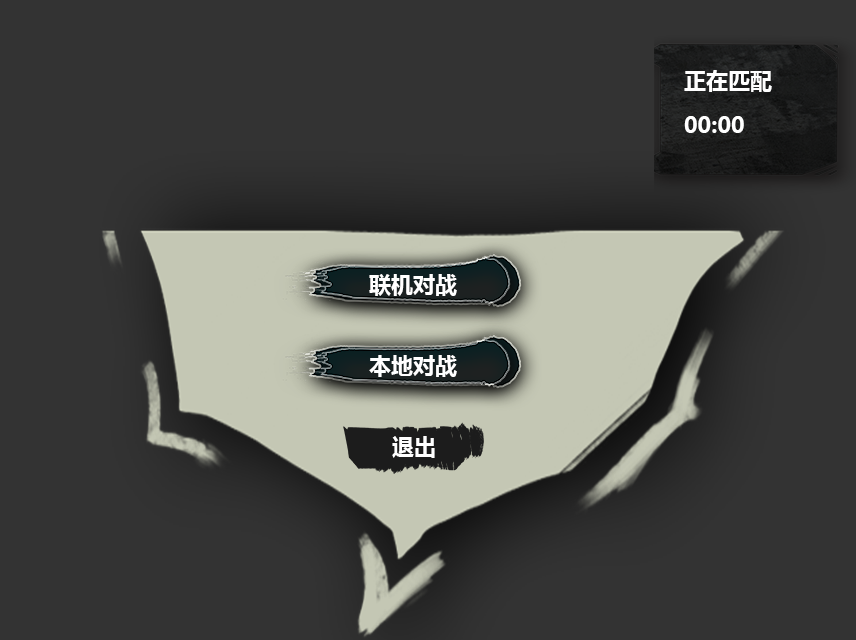
<style>
.page{position:relative;width:856px;height:640px;background:#333333}
.page>*{position:absolute;margin:0}
.t1{font:22px "MicrosoftYaHei-Bold";color:#ffffff}
</style>
<div class="page">
<p class="t1" style="left:684px;top:70px;width:88px;height:22px">正在匹配</p>
<p class="t1" style="left:684px;top:116px;width:60px;height:17px">00:00</p>
<p class="t1" style="left:369px;top:274px;width:88px;height:22px">联机对战</p>
<p class="t1" style="left:369px;top:355px;width:88px;height:22px">本地对战</p>
<p class="t1" style="left:392px;top:436px;width:43px;height:22px">退出</p>
</div>
